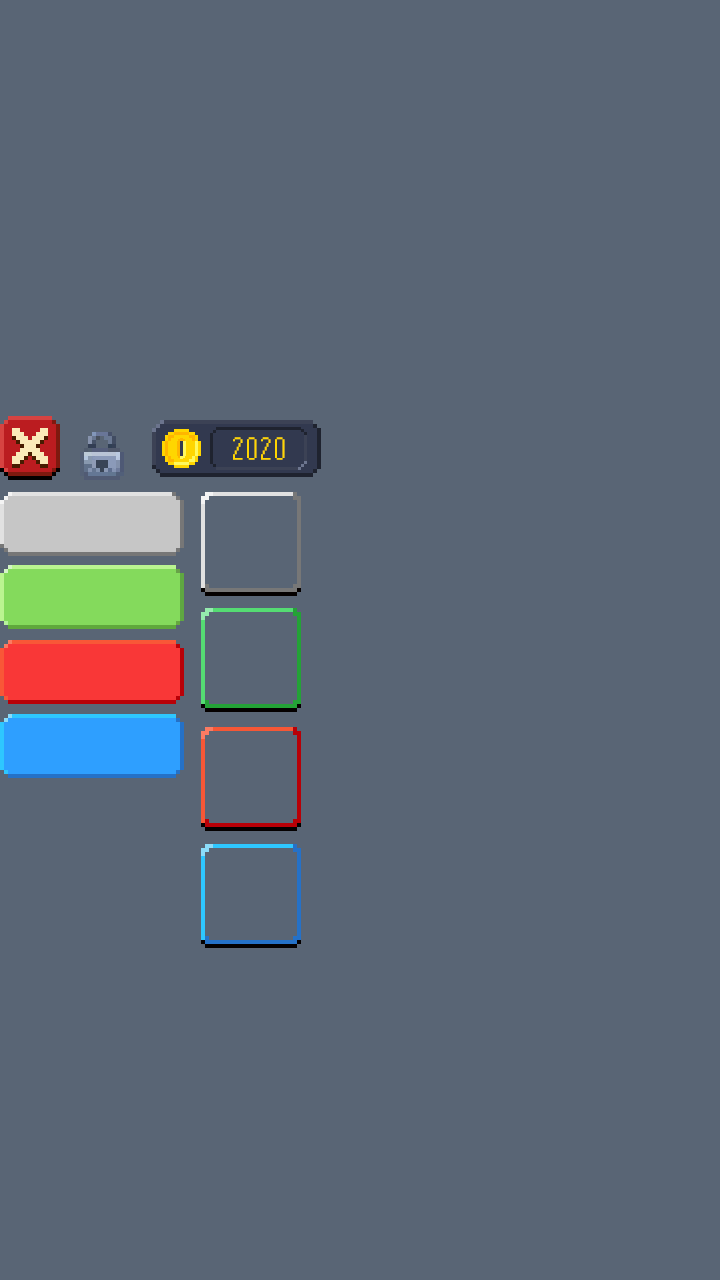
<style>
.page{position:relative;width:720px;height:1280px;background:#596575}
.page>*{position:absolute;margin:0}
.t1{font:28px "FZXS15--GB1-0";color:#ffd600}
</style>
<div class="page">
<p class="t1" style="left:233px;top:437px;width:52px;height:23px">2020</p>
</div>
